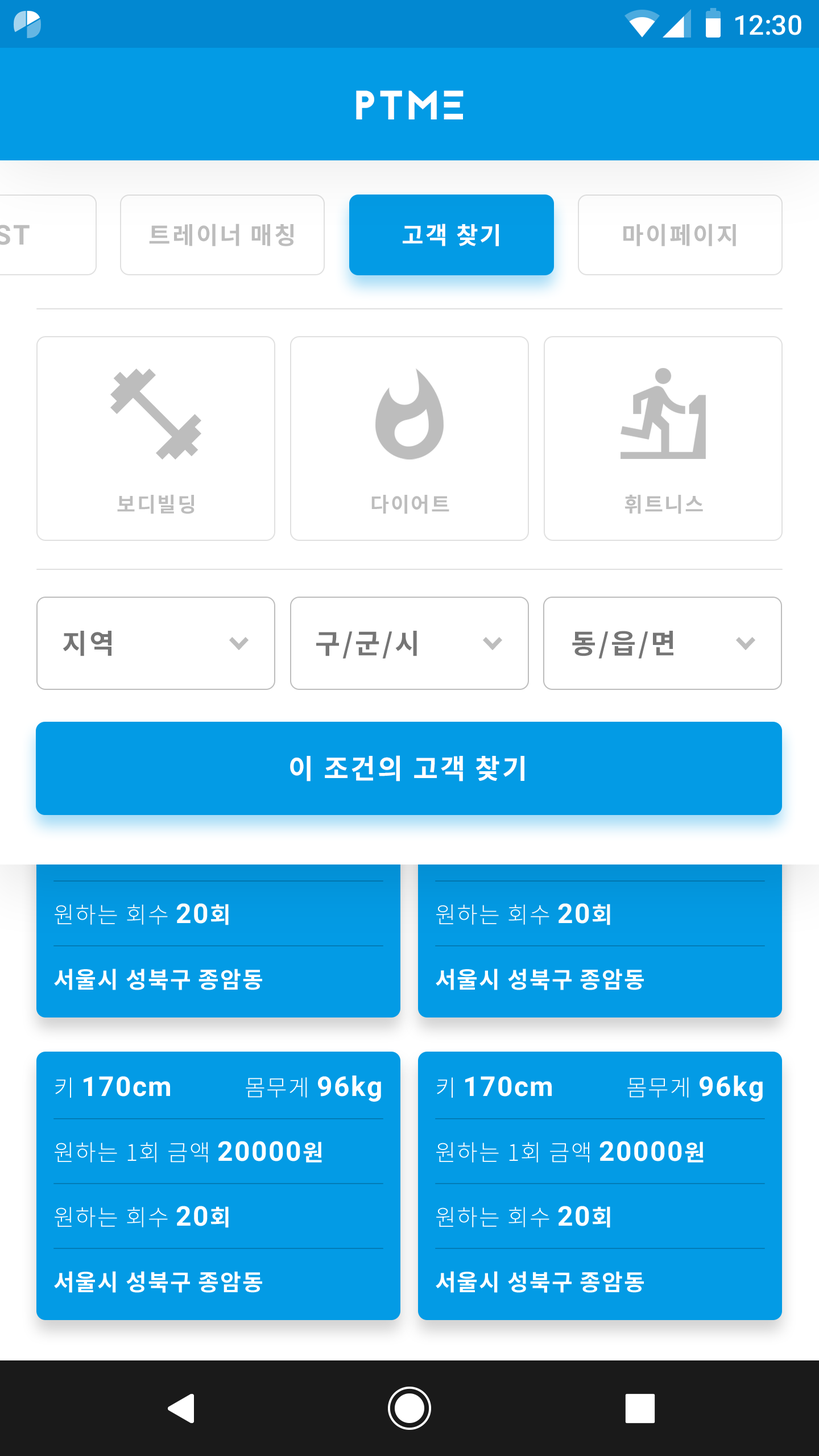
<style>
.page{position:relative;width:819px;height:1456px;background:#ffffff}
.page>*{position:absolute;margin:0}
.t1{font:27.3px "Roboto-Medium";color:#ffffff}
.t2{font:40.9px "Jaapokkisubtract-Regular";letter-spacing:0.05em;color:#ffffff}
.t3{font:23.9px "NotoSansCJKkr-Bold";letter-spacing:0.072em;color:#bdbdbd}
.t4{font:23.9px "NotoSansCJKkr-Bold";letter-spacing:0.072em;color:#ffffff}
.t5{font:20.5px "NotoSansCJKkr-Bold";letter-spacing:0.072em;color:#bdbdbd}
.t6{font:27.3px "NotoSansCJKkr-Bold";letter-spacing:0.072em;color:#757575}
.t7{font:27.3px "NotoSansCJKkr-Bold";letter-spacing:0.072em;color:#ffffff}
.t8{font:22.7px "NotoSansCJKkr-Light";letter-spacing:0.05em;color:#ffffff}
.t9{font:27.3px "Roboto-Bold";letter-spacing:0.05em;color:#ffffff}
.t10{font:22.7px "NotoSansCJKkr-Bold";letter-spacing:0.05em;color:#ffffff}
</style>
<div class="page">
<p class="t1" style="left:735px;top:15px;width:66px;height:20px">12:30</p>
<p class="t2" style="left:356px;top:90px;width:108px;height:29px">PTME</p>
<p class="t3" style="left:149px;top:224px;width:144px;height:22px">트레이너 매칭</p>
<p class="t4" style="left:403px;top:224px;width:96px;height:22px">고객 찾기</p>
<p class="t3" style="left:623px;top:224px;width:113px;height:22px">마이페이지</p>
<p class="t5" style="left:117px;top:494px;width:78px;height:20px">보디빌딩</p>
<p class="t5" style="left:371px;top:495px;width:78px;height:19px">다이어트</p>
<p class="t5" style="left:624px;top:494px;width:79px;height:20px">휘트니스</p>
<p class="t6" style="left:63px;top:631px;width:48px;height:25px">지역</p>
<p class="t6" style="left:316px;top:631px;width:101px;height:28px">구/군/시</p>
<p class="t6" style="left:572px;top:631px;width:101px;height:28px">동/읍/면</p>
<p class="t7" style="left:290px;top:755px;width:234px;height:26px">이 조건의 고객 찾기</p>
<p class="t8" style="left:55px;top:903px;width:174px;height:22px">원하는 회수 <span class="t9">20</span><span class="t10">회</span></p>
<p class="t8" style="left:436px;top:903px;width:174px;height:22px">원하는 회수 <span class="t9">20</span><span class="t10">회</span></p>
<p class="t10" style="left:54px;top:969px;width:208px;height:21px">서울시 성북구 종암동</p>
<p class="t10" style="left:436px;top:969px;width:208px;height:21px">서울시 성북구 종암동</p>
<p class="t9" style="left:55px;top:1076px;width:115px;height:22px"><span class="t8">키 </span>170cm</p>
<p class="t9" style="left:246px;top:1075px;width:135px;height:27px"><span class="t8">몸무게 </span>96kg</p>
<p class="t9" style="left:437px;top:1076px;width:115px;height:22px"><span class="t8">키 </span>170cm</p>
<p class="t9" style="left:627px;top:1075px;width:136px;height:27px"><span class="t8">몸무게 </span>96kg</p>
<p class="t8" style="left:55px;top:1141px;width:267px;height:22px">원하는 1회 금액 <span class="t9">20000</span><span class="t10">원</span></p>
<p class="t8" style="left:436px;top:1141px;width:268px;height:22px">원하는 1회 금액 <span class="t9">20000</span><span class="t10">원</span></p>
<p class="t8" style="left:55px;top:1206px;width:174px;height:22px">원하는 회수 <span class="t9">20</span><span class="t10">회</span></p>
<p class="t8" style="left:436px;top:1206px;width:174px;height:22px">원하는 회수 <span class="t9">20</span><span class="t10">회</span></p>
<p class="t10" style="left:54px;top:1271px;width:208px;height:22px">서울시 성북구 종암동</p>
<p class="t10" style="left:436px;top:1271px;width:208px;height:22px">서울시 성북구 종암동</p>
</div>
